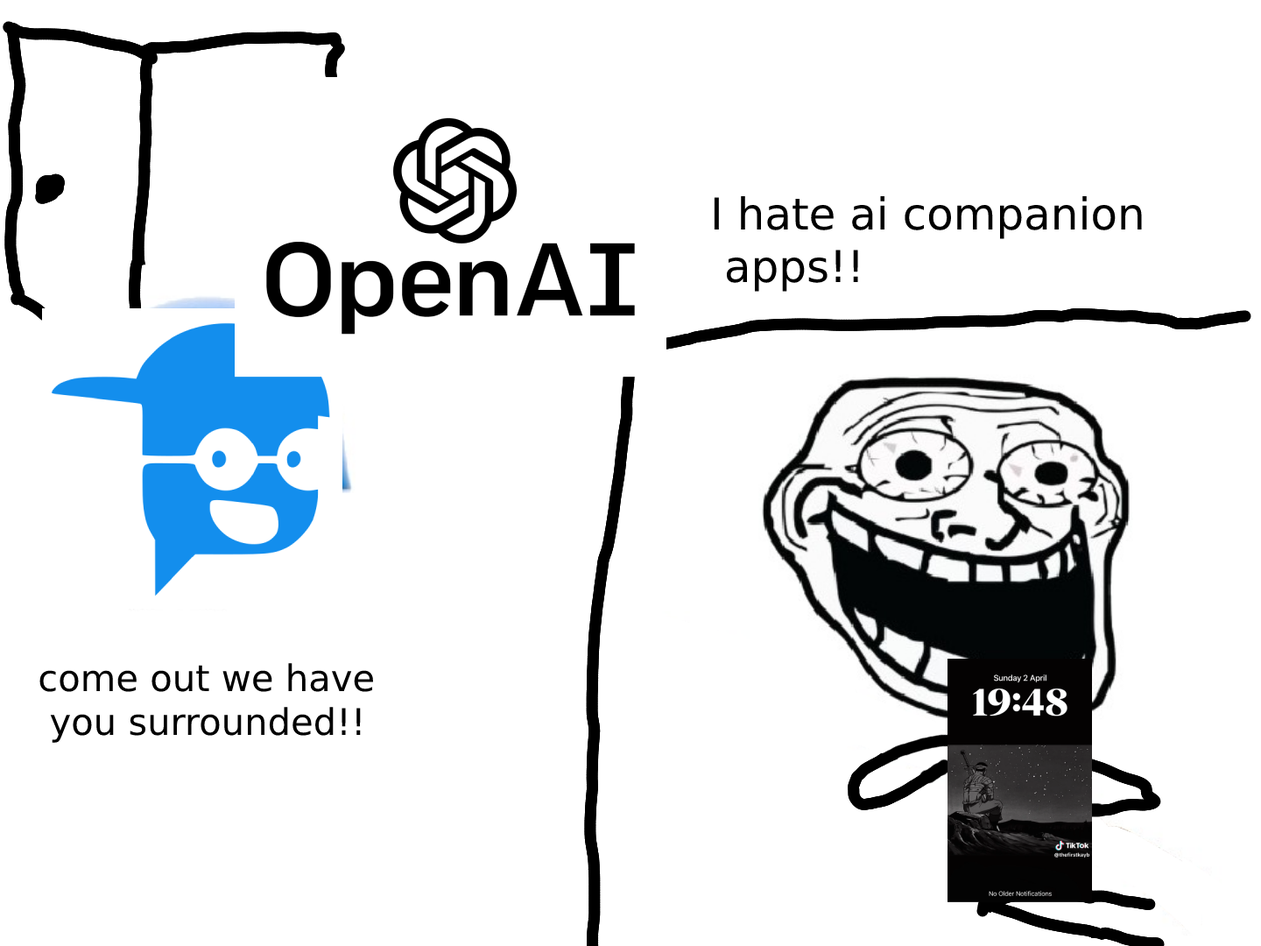
<style>
.page{position:relative;width:1261px;height:946px;background:#ffffff}
.page>*{position:absolute;margin:0}
.t1{font:43.8px "DejaVuSans";color:#000000}
.t2{font:36.5px "DejaVuSans";color:#000000}
</style>
<div class="page">
<p class="t1" style="left:714px;top:196px;width:428px;height:96px">I hate ai companion<br> apps!!</p>
<p class="t2" style="left:39px;top:663px;width:334px;height:80px">come out we have<br> you surrounded!!</p>
</div>
